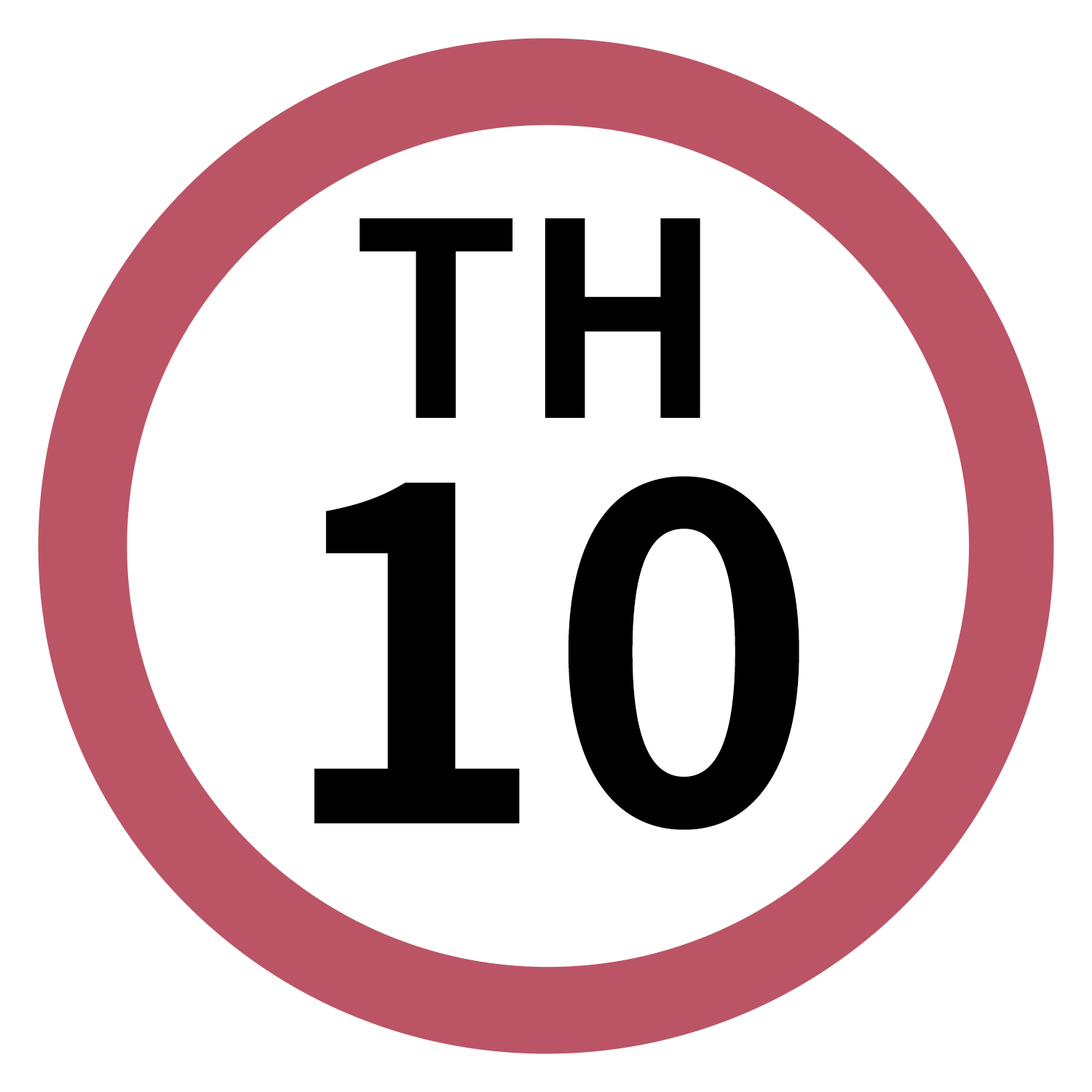
<style>
.page{position:relative;width:1092px;height:1092px;background:#ffffff}
.page>*{position:absolute;margin:0}
.t1{font:269.8px "NotoSansJP-Bold";color:#000000}
.t2{font:460.5px "NotoSansJP-Bold";color:#000000}
</style>
<div class="page">
<p class="t1" style="left:360px;top:218px;width:340px;height:200px">TH</p>
<p class="t2" style="left:314px;top:476px;width:485px;height:354px">10</p>
</div>
